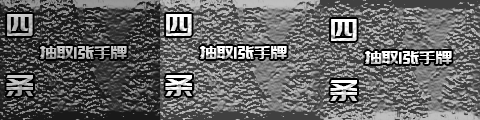
<style>
.page{position:relative;width:480px;height:120px}
.page>*{position:absolute;margin:0}
.t1{font:30px/60px "PangMenZhengDao";letter-spacing:-0.01em;color:#bbbbbb}
.t2{font:30px/60px "PangMenZhengDao";letter-spacing:-0.01em;color:#ffffff}
.t3{font:18px "PangMenZhengDao";letter-spacing:-0.01em}
.t4{font:18px "PangMenZhengDao";letter-spacing:-0.01em;color:#ffffff}
</style>
<div class="page">
<p class="t1" style="left:6px;top:14px;width:27px;height:82px">四<br>条</p>
<p class="t2" style="left:165px;top:14px;width:27px;height:82px">四<br>条</p>
<p class="t2" style="left:330px;top:19px;width:27px;height:82px">四<br>条</p>
<p class="t3" style="left:40px;top:46px;width:87px;height:13px">抽取1张手牌</p>
<p class="t4" style="left:200px;top:46px;width:87px;height:13px">抽取1张手牌</p>
<p class="t4" style="left:365px;top:51px;width:87px;height:13px">抽取1张手牌</p>
</div>
